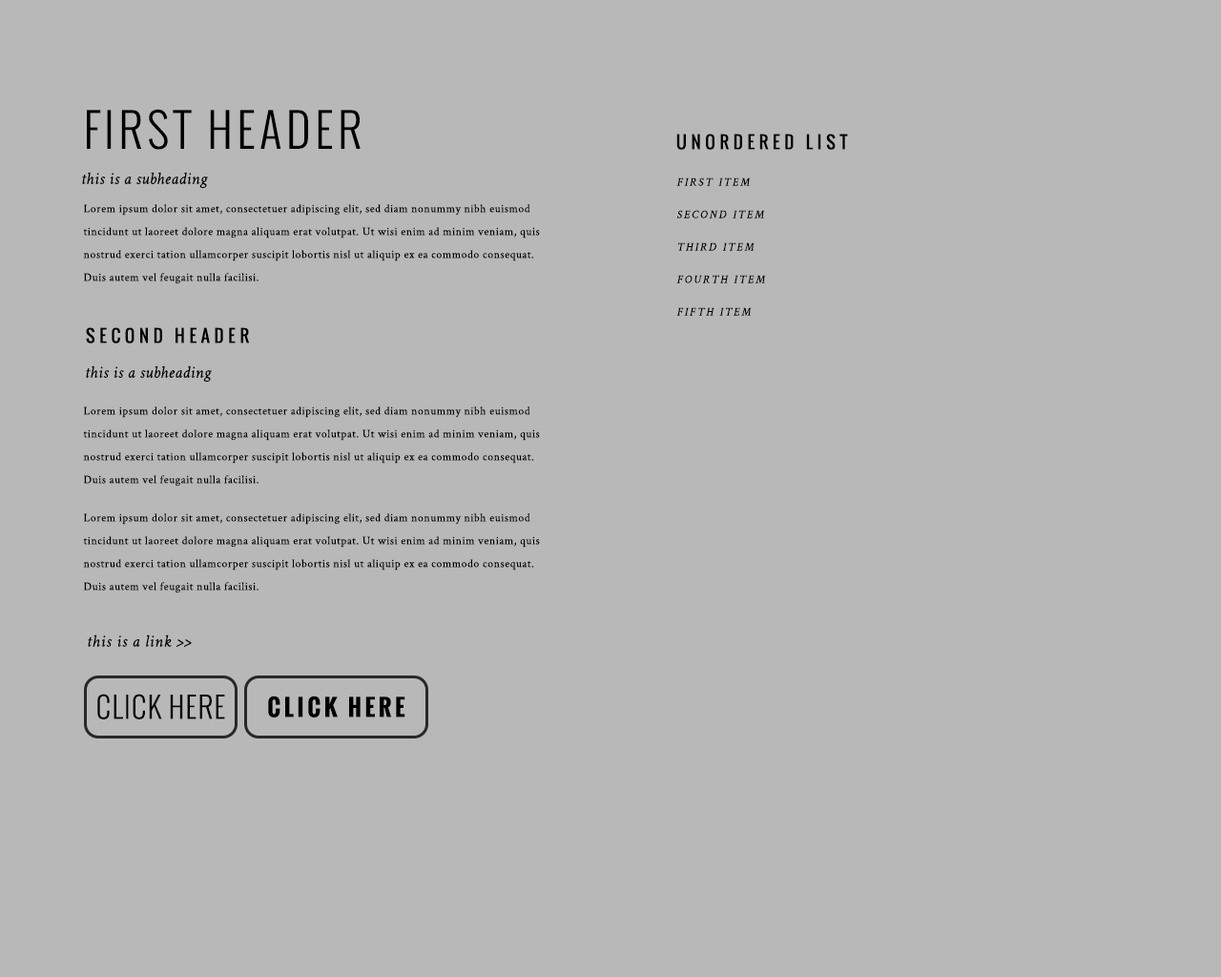
<style>
.page{position:relative;width:1221px;height:977px;background:#b8b8b8}
.page>*{position:absolute;margin:0}
.t1{font:45.8px "Oswald-Light";letter-spacing:0.1em;color:#000000;text-transform:uppercase}
.t2{font:17.2px "Oswald";letter-spacing:0.26em;color:#000000;text-transform:uppercase}
.t3{font:17.2px "CrimsonText-Italic";letter-spacing:0.02em;color:#000000}
.t4{font:11.4px/32.4px "CrimsonText-Italic";letter-spacing:0.18em;color:#000000;text-transform:uppercase}
.t5{font:11.4px/22.9px "CrimsonText-Roman";letter-spacing:0.04em;color:#000000}
.t6{font:17.2px "CrimsonText-Italic";letter-spacing:0.04em;color:#000000}
.t7{font:28.6px "Oswald-Light";letter-spacing:0.04em;color:#000000;text-transform:uppercase}
.t8{font:22.9px "Oswald-Bold";letter-spacing:0.16em;color:#000000;text-transform:uppercase}
</style>
<div class="page">
<p class="t1" style="left:87px;top:109px;width:274px;height:41px">First Header</p>
<p class="t2" style="left:676px;top:134px;width:172px;height:16px">unordered list</p>
<p class="t3" style="left:82px;top:172px;width:126px;height:16px">this is a subheading</p>
<p class="t4" style="left:676px;top:177px;width:90px;height:139px">first item<br>second item<br>third item<br>fourth item<br>fifth item</p>
<p class="t5" style="left:83px;top:204px;width:457px;height:80px">Lorem ipsum dolor sit amet, consectetuer adipiscing elit, sed diam nonummy nibh euismod tincidunt ut laoreet dolore magna aliquam erat volutpat. Ut wisi enim ad minim veniam, quis nostrud exerci tation ullamcorper suscipit lobortis nisl ut aliquip ex ea commodo consequat. Duis autem vel feugait nulla facilisi.</p>
<p class="t2" style="left:86px;top:327px;width:163px;height:16px">second header</p>
<p class="t3" style="left:86px;top:365px;width:126px;height:17px">this is a subheading</p>
<p class="t5" style="left:83px;top:406px;width:457px;height:80px">Lorem ipsum dolor sit amet, consectetuer adipiscing elit, sed diam nonummy nibh euismod tincidunt ut laoreet dolore magna aliquam erat volutpat. Ut wisi enim ad minim veniam, quis nostrud exerci tation ullamcorper suscipit lobortis nisl ut aliquip ex ea commodo consequat. Duis autem vel feugait nulla facilisi.</p>
<p class="t5" style="left:83px;top:513px;width:457px;height:80px">Lorem ipsum dolor sit amet, consectetuer adipiscing elit, sed diam nonummy nibh euismod tincidunt ut laoreet dolore magna aliquam erat volutpat. Ut wisi enim ad minim veniam, quis nostrud exerci tation ullamcorper suscipit lobortis nisl ut aliquip ex ea commodo consequat. Duis autem vel feugait nulla facilisi.</p>
<p class="t6" style="left:88px;top:634px;width:104px;height:13px">this is a link &gt;&gt;</p>
<p class="t7" style="left:97px;top:693px;width:128px;height:26px">click here</p>
<p class="t8" style="left:268px;top:695px;width:137px;height:22px">click here</p>
</div>
